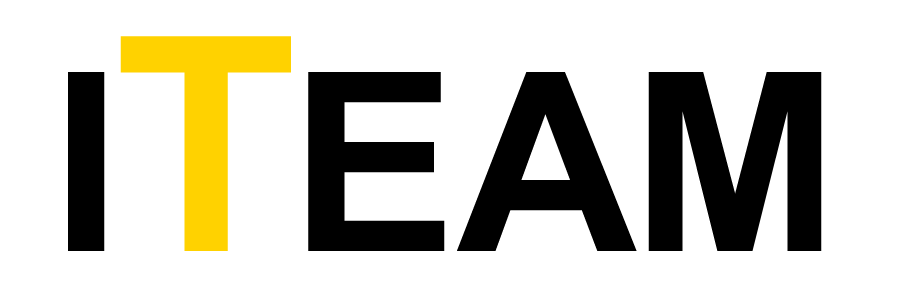
<style>
.page{position:relative;width:900px;height:300px;background:#ffffff}
.page>*{position:absolute;margin:0}
.t1{font:250px "Arial-BoldMT";color:#000000}
.t2{font:300px "Arial-BoldMT";color:#ffd200}
</style>
<div class="page">
<p class="t1" style="left:68px;top:36px;width:754px;height:215px">I<span class="t2">T</span>EAM</p>
</div>
